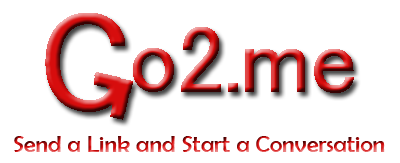
<style>
.page{position:relative;width:400px;height:163px;background:#ffffff}
.page>*{position:absolute;margin:0}
.t1{font:24px "BerlinSansFB-Reg"}
</style>
<div class="page">
<p class="t1" style="left:14px;top:136px;width:371px;height:16px">Send a Link and Start a Conversation</p>
</div>
